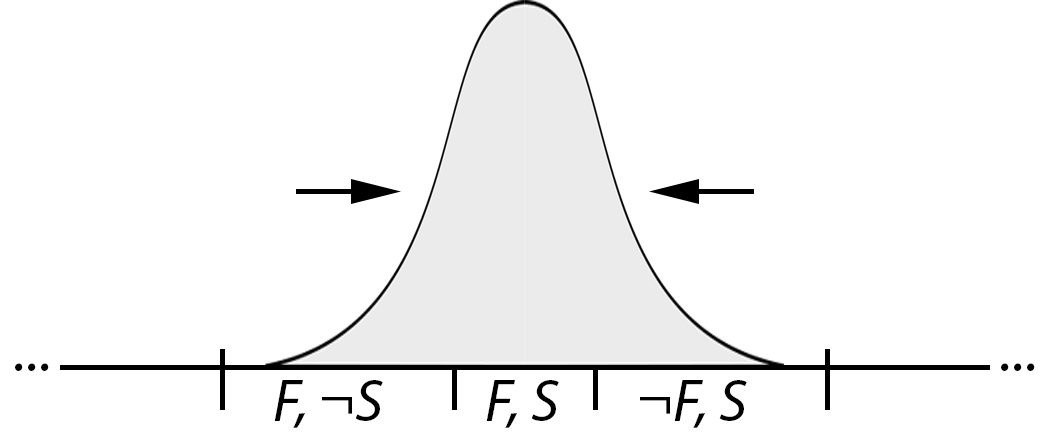
<style>
.page{position:relative;width:1050px;height:435px;background:#ffffff}
.page>*{position:absolute;margin:0}
.t1{font:60px "MyriadPro-It";color:#000000}
</style>
<div class="page">
<p class="t1" style="left:15px;top:363px;width:34px;height:8px">...</p>
<p class="t1" style="left:1001px;top:363px;width:34px;height:8px">...</p>
<p class="t1" style="left:274px;top:380px;width:109px;height:48px">F, ¬S</p>
<p class="t1" style="left:486px;top:380px;width:73px;height:48px">F, S</p>
<p class="t1" style="left:640px;top:380px;width:107px;height:48px">¬F, S</p>
</div>
